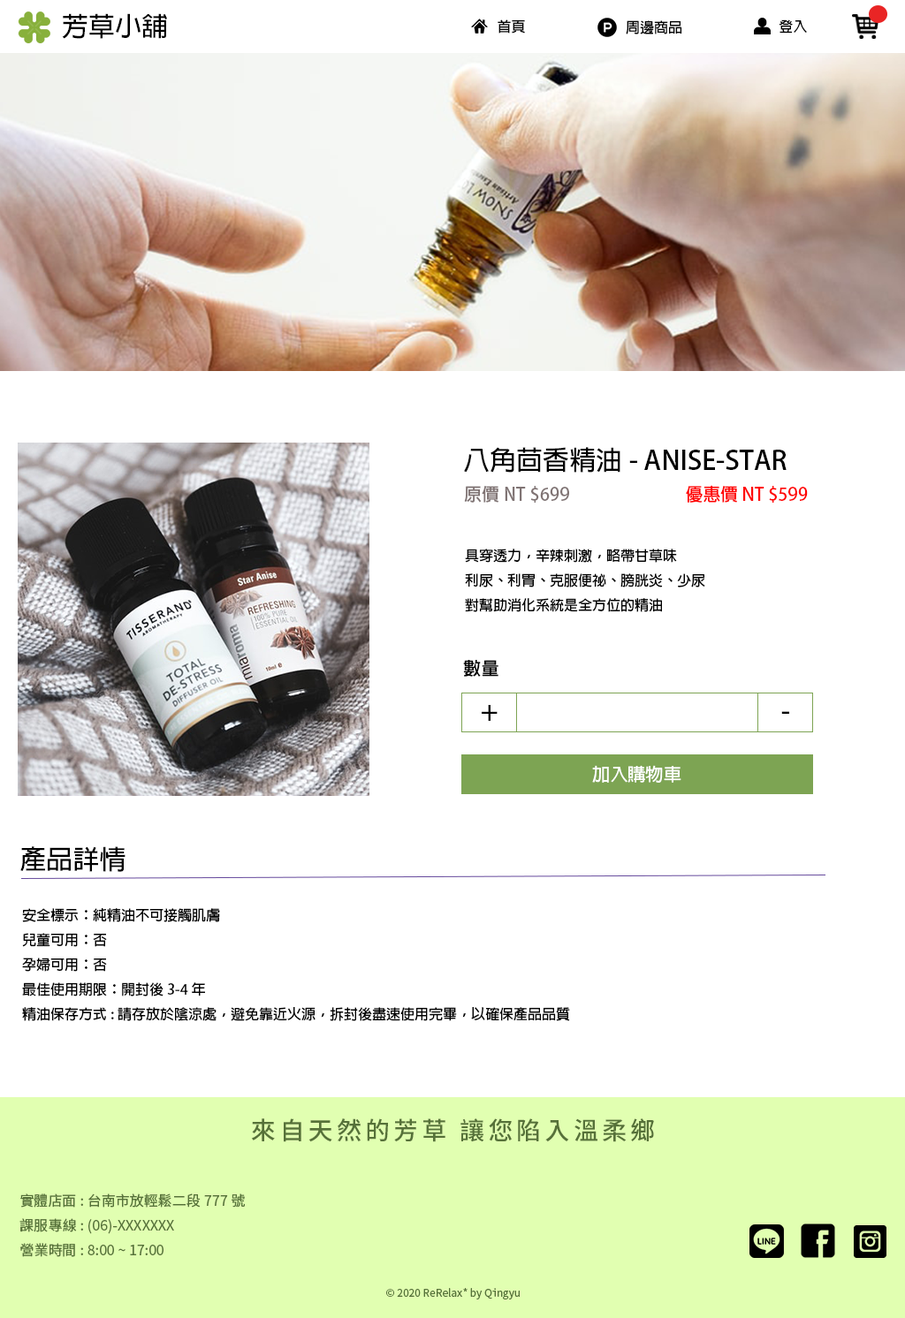
<style>
.page{position:relative;width:905px;height:1318px;background:#ffffff}
.page>*{position:absolute;margin:0}
.t1{font:26.5px "AdobeFanHeitiStd-Bold";color:#000000}
.t2{font:14.1px "AdobeFanHeitiStd-Bold";color:#000000}
.t3{font:17.7px "AdobeFanHeitiStd-Bold";color:#807474}
.t4{font:17.7px "AdobeFanHeitiStd-Bold";color:#ff0000}
.t5{font:17.7px "AdobeFanHeitiStd-Bold";color:#000000}
.t6{font:17.7px "AdobeFanHeitiStd-Bold";color:#ffffff}
.t7{font:24.7px "NotoSansTC-Medium";letter-spacing:0.15em;color:#567139}
.t8{font:14.1px "NotoSansTC-Regular";color:#567139}
.t9{font:10.6px "NotoSansTC-Regular";color:#567139}
</style>
<div class="page">
<p class="t1" style="left:62px;top:13px;width:105px;height:26px">芳草小舖</p>
<p class="t2" style="left:497px;top:19px;width:28px;height:15px">首頁</p>
<p class="t2" style="left:625px;top:20px;width:57px;height:14px">周邊商品</p>
<p class="t2" style="left:778px;top:19px;width:29px;height:15px">登入</p>
<p class="t1" style="left:464px;top:447px;width:322px;height:26px">八角茴香精油- ANISE-STAR</p>
<p class="t3" style="left:464px;top:486px;width:105px;height:17px">原價NT $699</p>
<p class="t4" style="left:686px;top:485px;width:121px;height:18px">優惠價 NT $599</p>
<p class="t2" style="left:465px;top:549px;width:240px;height:63px">具穿透力，辛辣刺激，略帶甘草味<br>利尿、利胃、克服便祕、膀胱炎、少尿<br>對幫助消化系統是全方位的精油</p>
<p class="t5" style="left:463px;top:660px;width:35px;height:17px">數量</p>
<p class="t1" style="left:481px;top:705px;width:16px;height:16px">+</p>
<p class="t1" style="left:781px;top:711px;width:8px;height:3px">-</p>
<p class="t6" style="left:592px;top:765px;width:89px;height:18px">加入購物車</p>
<p class="t1" style="left:20px;top:846px;width:105px;height:26px">產品詳情</p>
<p class="t2" style="left:22px;top:908px;width:548px;height:113px">安全標示：純精油不可接觸肌膚<br>兒童可用：否<br>孕婦可用：否<br>最佳使用期限：開封後3-4年<br>精油保存方式:請存放於陰涼處，避免靠近火源，拆封後盡速使用完畢，以確保產品品質</p>
<p class="t7" style="left:251px;top:1118px;width:403px;height:24px">來自天然的芳草 讓您陷入溫柔鄉</p>
<p class="t8" style="left:19px;top:1194px;width:226px;height:63px">實體店面: 台南市放輕鬆二段777號 <br>課服專線: (06)-XXXXXXX<br>營業時間: 8:00 ~ 17:00</p>
<p class="t9" style="left:386px;top:1288px;width:133px;height:12px">© 2020 ReRelax* by Qingyu</p>
</div>
